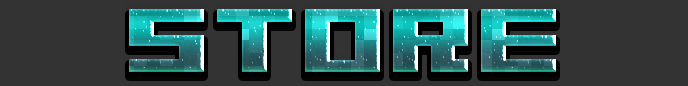
<style>
.page{position:relative;width:688px;height:86px;background:#333333}
.page>*{position:absolute;margin:0}
.t1{font:100px "04b09";text-transform:uppercase}
</style>
<div class="page">
<p class="t1" style="left:129px;top:9px;width:427px;height:63px">STORE</p>
</div>
